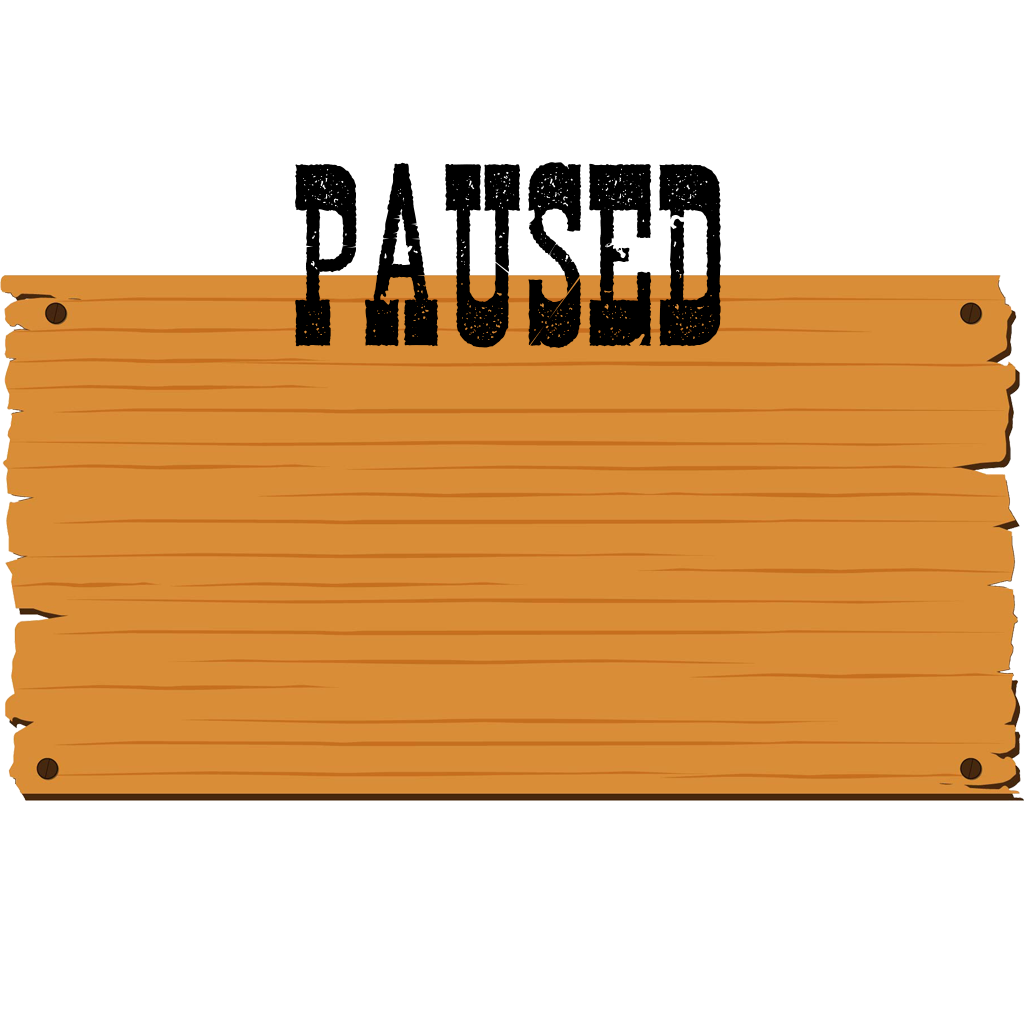
<style>
.page{position:relative;width:1024px;height:1024px;background:#ffffff}
.page>*{position:absolute;margin:0}
.t1{font:157px "DurangoWesternEroded";color:#000000}
</style>
<div class="page">
<p class="t1" style="left:295px;top:162px;width:426px;height:186px">PAUSED</p>
</div>
